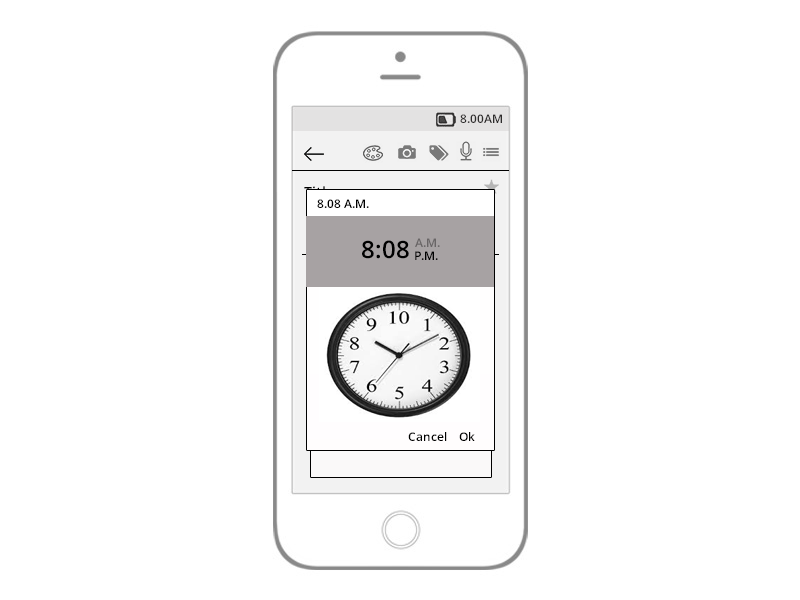
<style>
.page{position:relative;width:800px;height:600px;background:#ffffff}
.page>*{position:absolute;margin:0}
.t1{font:12px "OpenSans-Semibold";color:#2e2d2d}
.t2{font:12px "OpenSans-Semibold";color:#000000}
.t3{font:24px "OpenSans-Semibold";color:#000000}
.t4{font:12px "OpenSans-Semibold";color:#696566}
</style>
<div class="page">
<p class="t1" style="left:460px;top:114px;width:42px;height:9px">8.00AM</p>
<p class="t2" style="left:317px;top:199px;width:52px;height:9px">8.08 A.M.</p>
<p class="t3" style="left:362px;top:240px;width:47px;height:19px">8:08</p>
<p class="t4" style="left:415px;top:238px;width:25px;height:9px">A.M.</p>
<p class="t2" style="left:415px;top:251px;width:23px;height:9px">P.M.</p>
<p class="t2" style="left:408px;top:432px;width:39px;height:9px">Cancel</p>
<p class="t2" style="left:459px;top:432px;width:16px;height:9px">Ok</p>
</div>
